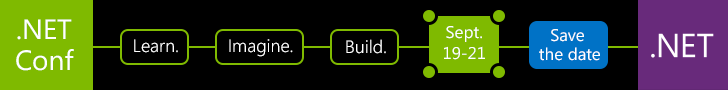
<style>
.page{position:relative;width:728px;height:90px;background:#000000}
.page>*{position:absolute;margin:0}
.t1{font:28px/31px "SegoeUI";color:#ffffff}
.t2{font:17px/21px "SegoeUI";color:#ffffff}
.t3{font:17px/19px "SegoeUI";color:#ffffff}
.t4{font:18.1px "SegoeUI-Semilight";color:#ffffff}
</style>
<div class="page">
<p class="t1" style="left:16px;top:19px;width:58px;height:52px;text-align:center">.NET<br>Conf</p>
<p class="t2" style="left:444px;top:26px;width:41px;height:34px;text-align:center">Sept.<br>19-21</p>
<p class="t3" style="left:539px;top:29px;width:61px;height:32px;text-align:center">Save <br>the date</p>
<p class="t4" style="left:134px;top:39px;width:44px;height:14px">Learn.</p>
<p class="t4" style="left:229px;top:39px;width:64px;height:18px">Imagine.</p>
<p class="t4" style="left:346px;top:39px;width:40px;height:15px">Build.</p>
</div>
